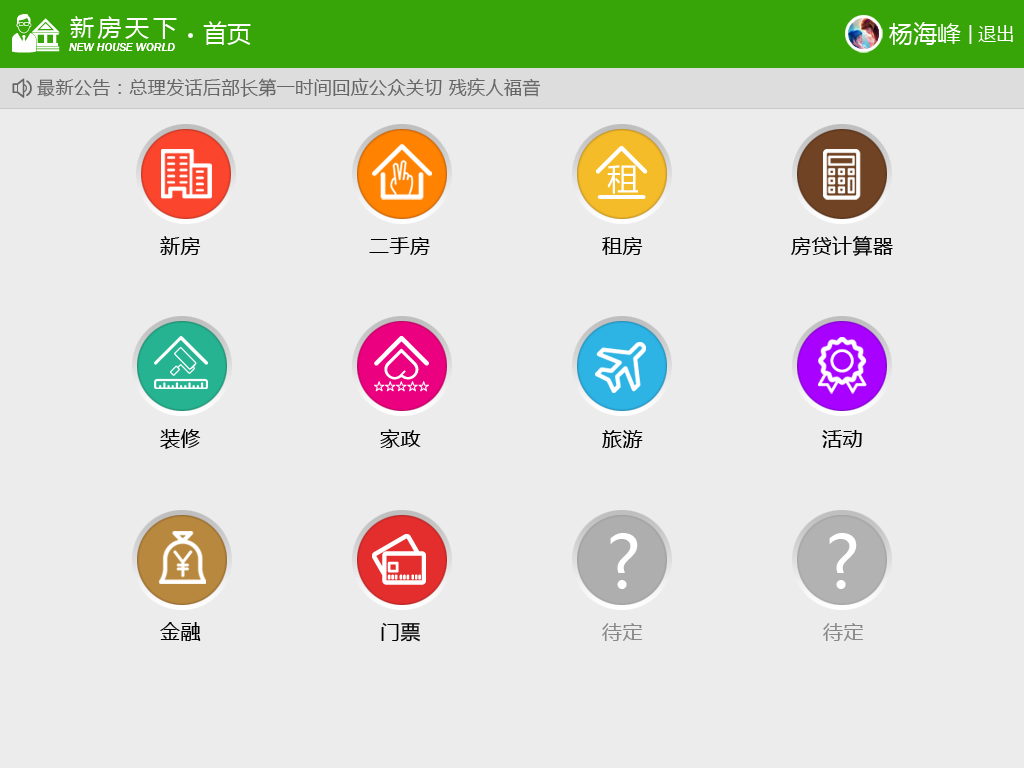
<style>
.page{position:relative;width:1024px;height:768px;background:#ececec}
.page>*{position:absolute;margin:0}
.t1{font:24px "MicrosoftYaHei";letter-spacing:0.15em;color:#ffffff}
.t2{font:24px "MicrosoftYaHei";color:#ffffff}
.t3{font:18px "MicrosoftYaHei";color:#ffffff}
.t4{font:12px "FranklinGothic-MediumItalic";color:#ffffff}
.t5{font:18px "MicrosoftYaHei";letter-spacing:0.025em;color:#666666}
.t6{font:20px "MicrosoftYaHei";letter-spacing:0.025em;color:#000000}
.t7{font:72px "MicrosoftYaHei";letter-spacing:0.025em;color:#ffffff}
.t8{font:20px "MicrosoftYaHei";letter-spacing:0.025em;color:#878787}
</style>
<div class="page">
<p class="t1" style="left:70px;top:16px;width:107px;height:23px">新房天下</p>
<p class="t2" style="left:203px;top:21px;width:48px;height:24px">首页</p>
<p class="t2" style="left:889px;top:22px;width:72px;height:23px">杨海峰</p>
<p class="t3" style="left:969px;top:25px;width:44px;height:19px">| 退出</p>
<p class="t4" style="left:69px;top:43px;width:106px;height:8px">NEW HOUSE WORLD</p>
<p class="t4" style="left:69px;top:43px;width:106px;height:8px">NEW HOUSE WORLD</p>
<p class="t5" style="left:37px;top:78px;width:504px;height:19px">最新公告：总理发话后部长第一时间回应公众关切 残疾人福音</p>
<p class="t6" style="left:160px;top:236px;width:41px;height:19px">新房</p>
<p class="t6" style="left:369px;top:237px;width:61px;height:18px">二手房</p>
<p class="t6" style="left:602px;top:237px;width:41px;height:18px">租房</p>
<p class="t6" style="left:791px;top:236px;width:102px;height:20px">房贷计算器</p>
<p class="t6" style="left:160px;top:429px;width:41px;height:20px">装修</p>
<p class="t6" style="left:380px;top:429px;width:41px;height:19px">家政</p>
<p class="t6" style="left:602px;top:430px;width:41px;height:18px">旅游</p>
<p class="t6" style="left:822px;top:430px;width:40px;height:18px">活动</p>
<p class="t7" style="left:610px;top:533px;width:28px;height:56px">?</p>
<p class="t7" style="left:829px;top:533px;width:28px;height:56px">?</p>
<p class="t6" style="left:160px;top:622px;width:41px;height:19px">金融</p>
<p class="t6" style="left:381px;top:623px;width:39px;height:19px">门票</p>
<p class="t8" style="left:602px;top:623px;width:41px;height:18px">待定</p>
<p class="t8" style="left:823px;top:623px;width:41px;height:18px">待定</p>
</div>
